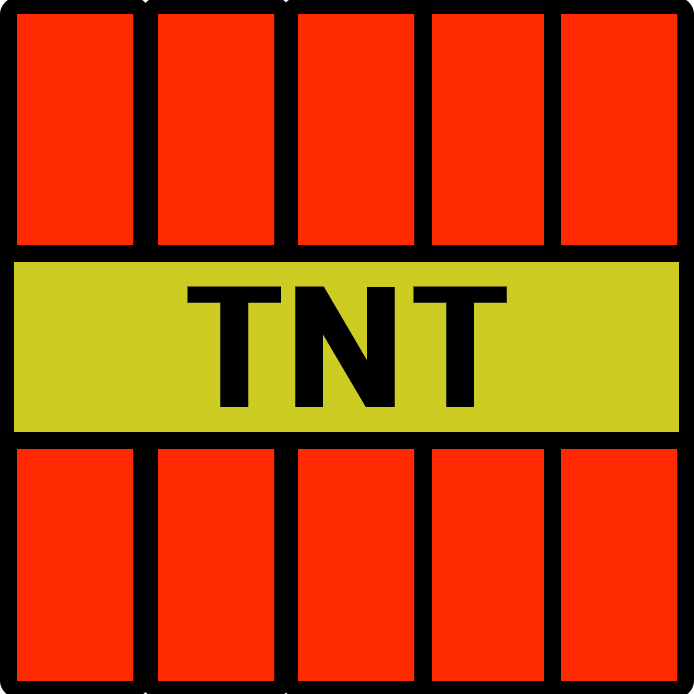
<style>
.page{position:relative;width:694px;height:694px;background:#ff2a00}
.page>*{position:absolute;margin:0}
.t1{font:250px "Dhurjati";color:#000000}
</style>
<div class="page">
<p class="t1" style="left:187px;top:286px;width:320px;height:121px">TNT</p>
</div>
